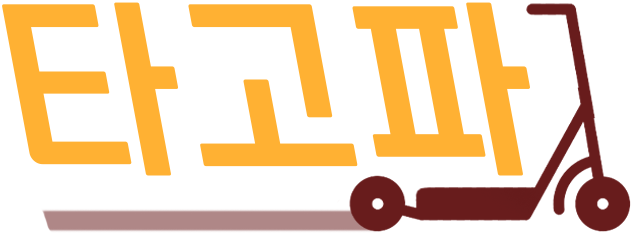
<style>
.page{position:relative;width:632px;height:234px;background:#ffffff}
.page>*{position:absolute;margin:0}
.t1{font:203.5px "NIXGONB-Vb";color:#ffb133}
</style>
<div class="page">
<p class="t1" style="left:2px;top:2px;width:528px;height:174px">타고파</p>
</div>
